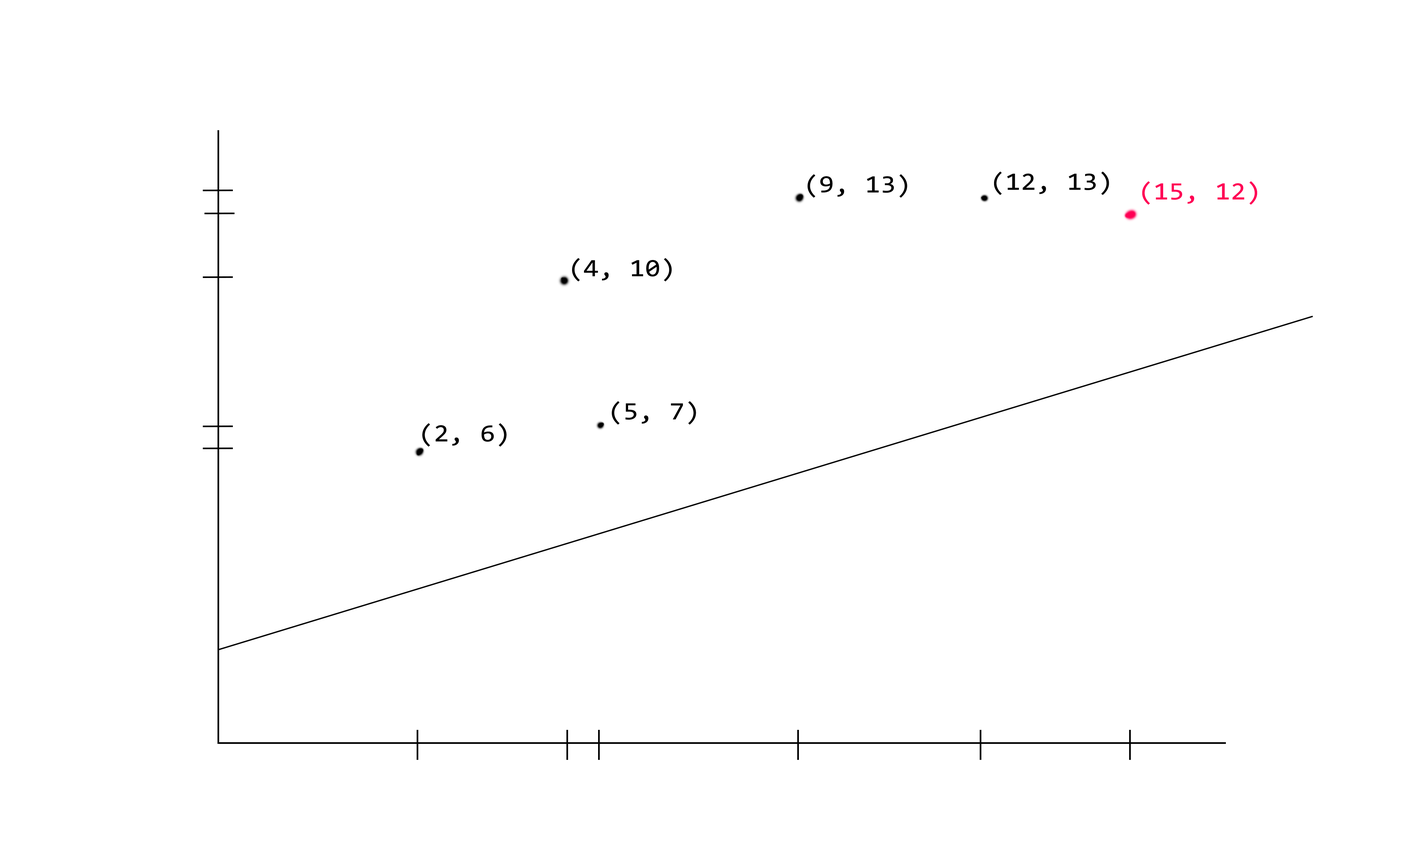
<style>
.page{position:relative;width:1401px;height:851px;background:#ffffff}
.page>*{position:absolute;margin:0}
.t1{font:25px "Consolas";letter-spacing:0.01em;color:#000000;scale:1.1 1}
.t2{font:25px "Consolas";letter-spacing:0.01em;color:#ff0054;scale:1.1 1}
</style>
<div class="page">
<p class="t1" style="left:994px;top:172px;width:115px;height:23px">(12, 13)</p>
<p class="t1" style="left:808px;top:174px;width:100px;height:24px">(9, 13)</p>
<p class="t2" style="left:1142px;top:181px;width:116px;height:24px">(15, 12)</p>
<p class="t1" style="left:572px;top:258px;width:100px;height:24px">(4, 10)</p>
<p class="t1" style="left:612px;top:401px;width:84px;height:24px">(5, 7)</p>
<p class="t1" style="left:422px;top:423px;width:85px;height:24px">(2, 6)</p>
</div>
